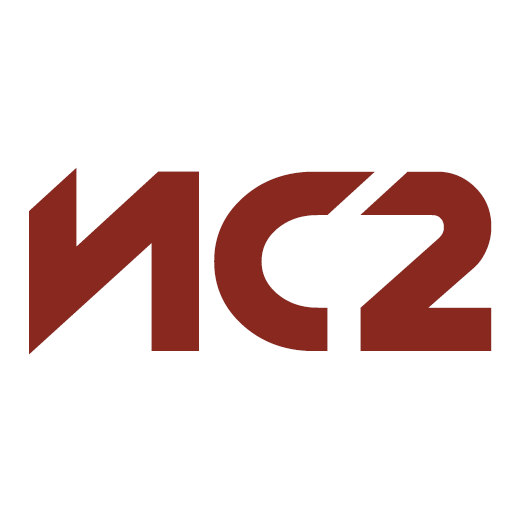
<style>
.page{position:relative;width:520px;height:520px;background:#ffffff}
.page>*{position:absolute;margin:0}
.t1{font:242.4px "NewZelek";letter-spacing:-0.03em;color:#89281e}
</style>
<div class="page">
<p class="t1" style="left:29px;top:167px;width:463px;height:188px">ИС2</p>
</div>
